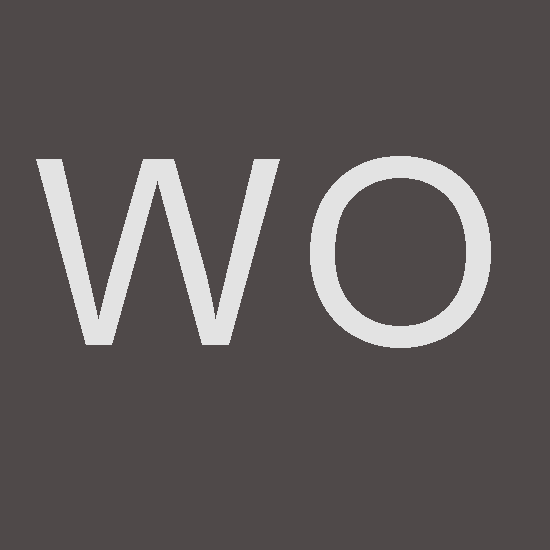
<style>
.page{position:relative;width:550px;height:550px;background:#4f4949}
.page>*{position:absolute;margin:0}
.t1{font:259.5px "ArialMT";color:#e3e3e3}
</style>
<div class="page">
<p class="t1" style="left:36px;top:156px;width:455px;height:192px">WO</p>
</div>
